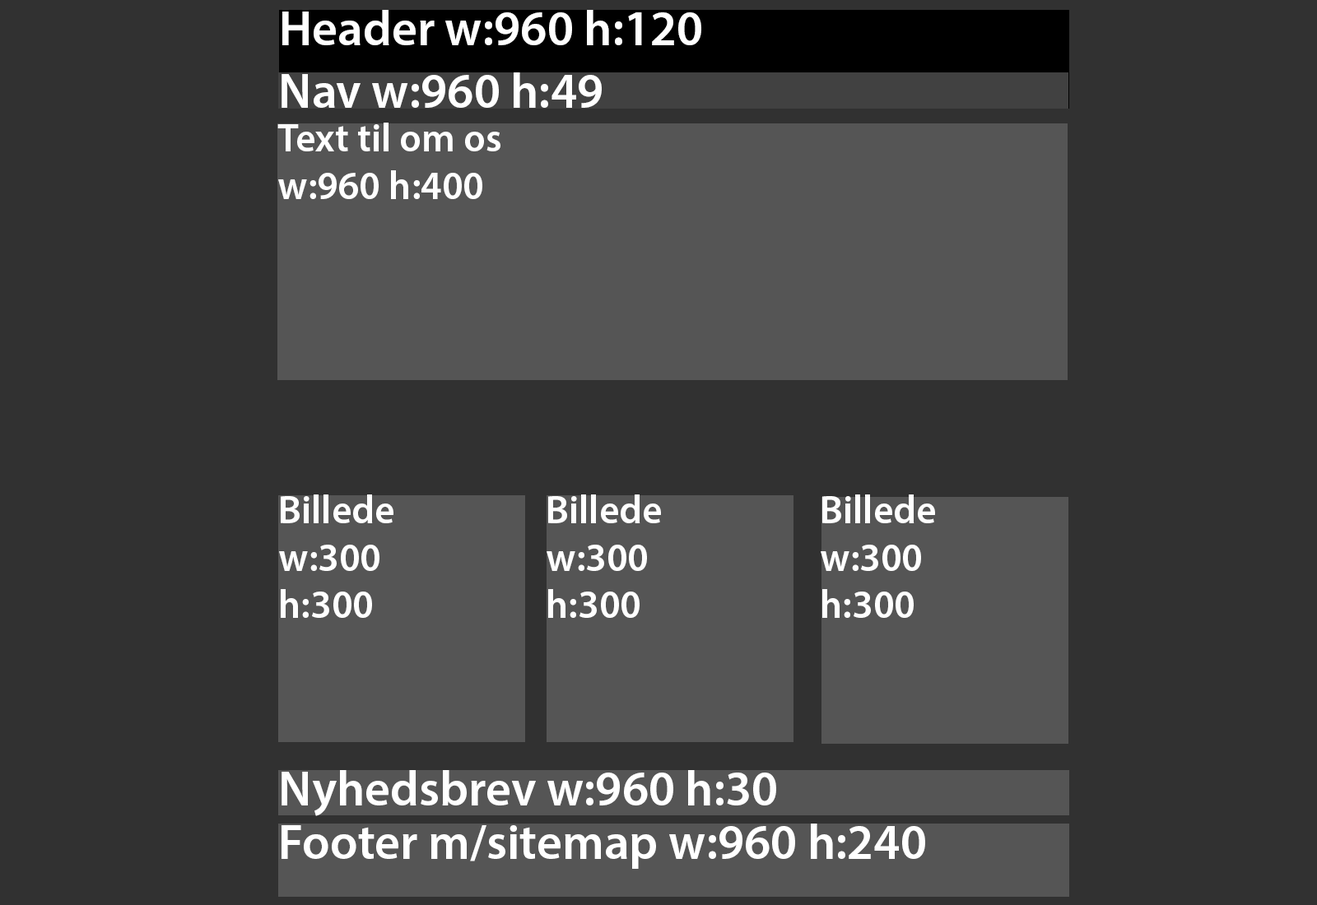
<style>
.page{position:relative;width:1317px;height:905px;background:#313131}
.page>*{position:absolute;margin:0}
.t1{font:49.4px "MyriadPro-Semibold";color:#ffffff}
.t2{font:39.5px "MyriadPro-Semibold";color:#ffffff}
</style>
<div class="page">
<p class="t1" style="left:282px;top:10px;width:419px;height:35px">Header w:960 h:120</p>
<p class="t1" style="left:282px;top:72px;width:320px;height:36px">Nav w:960 h:49</p>
<p class="t2" style="left:277px;top:123px;width:223px;height:76px">Text til om os<br>w:960 h:400</p>
<p class="t2" style="left:279px;top:495px;width:114px;height:123px">Billede<br>w:300<br>h:300</p>
<p class="t2" style="left:547px;top:495px;width:114px;height:123px">Billede<br>w:300<br>h:300</p>
<p class="t2" style="left:821px;top:495px;width:114px;height:123px">Billede<br>w:300<br>h:300</p>
<p class="t1" style="left:282px;top:770px;width:494px;height:47px">Nyhedsbrev w:960 h:30</p>
<p class="t1" style="left:282px;top:824px;width:643px;height:45px">Footer m/sitemap w:960 h:240</p>
</div>
